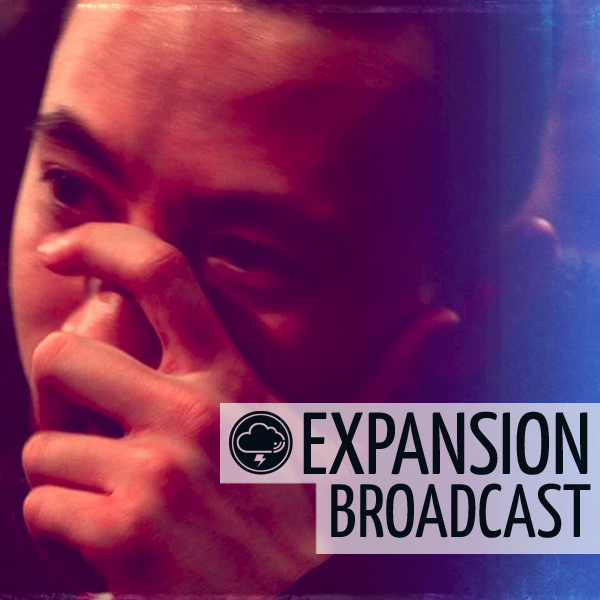
<style>
.page{position:relative;width:600px;height:600px}
.page>*{position:absolute;margin:0}
.t1{font:87.9px/75.3px "YanoneKaffeesatz-Regular";color:#050d17;text-transform:uppercase}
.t2{font:75.3px/62.8px "YanoneKaffeesatz-Regular";color:#050d17;text-transform:uppercase}
</style>
<div class="page">
<p class="t1" style="left:303px;top:411px;width:288px;height:127px;text-align:right">Expansion<br><span class="t2">Broadcast</span></p>
</div>
